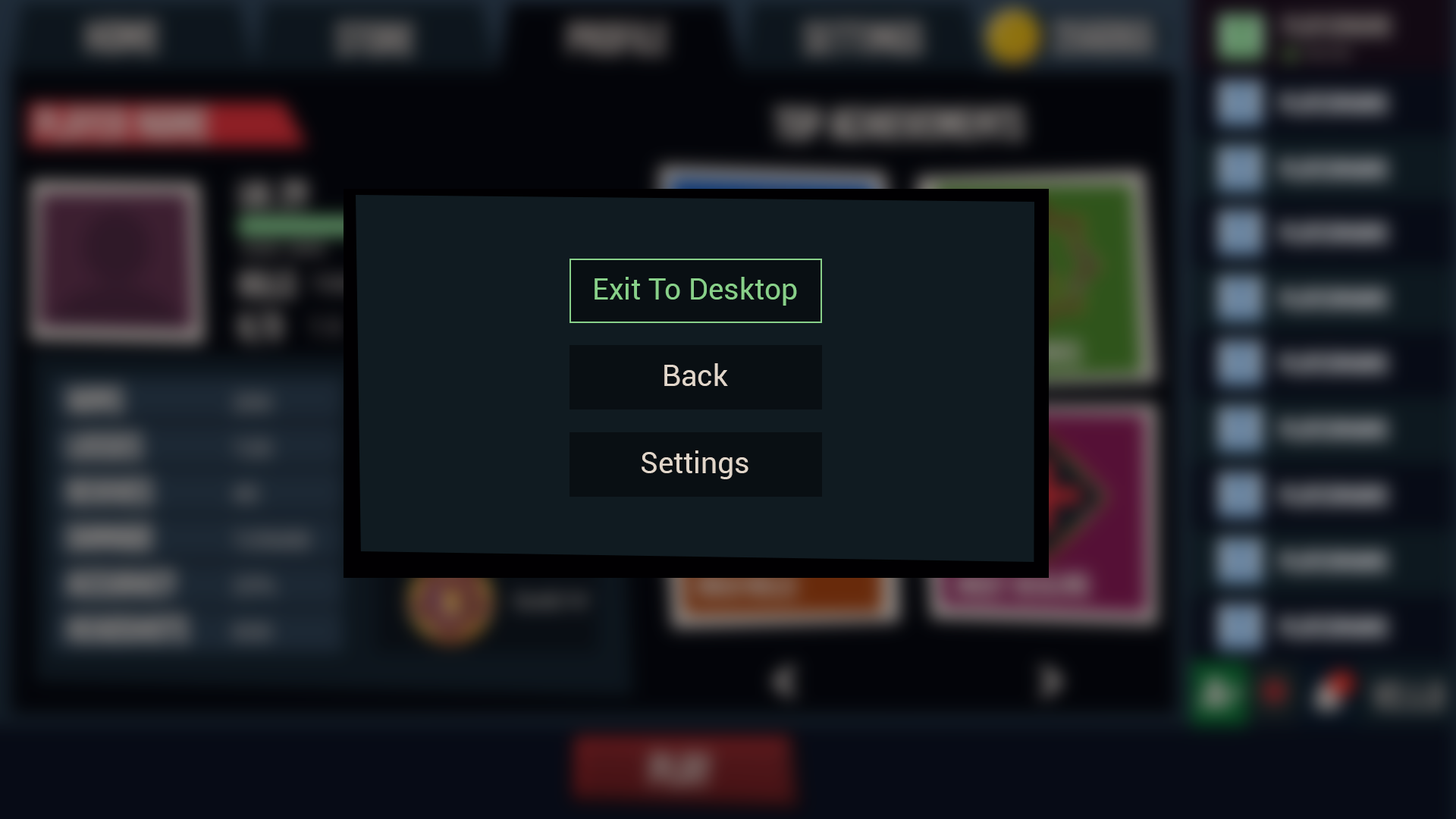
<style>
.page{position:relative;width:1456px;height:819px}
.page>*{position:absolute;margin:0}
.t1{font:29.3px "Roboto-Regular";color:#88d089}
.t2{font:29.3px "Roboto-Regular";color:#e1d6ca}
</style>
<div class="page">
<p class="t1" style="left:595px;top:277px;width:202px;height:29px">Exit To Desktop</p>
<p class="t2" style="left:664px;top:363px;width:64px;height:23px">Back</p>
<p class="t2" style="left:642px;top:450px;width:106px;height:29px">Settings</p>
</div>
